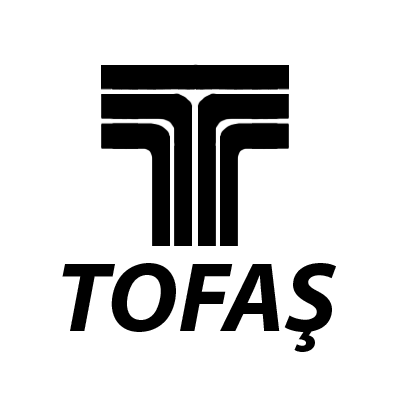
<style>
.page{position:relative;width:400px;height:400px;background:#ffffff}
.page>*{position:absolute;margin:0}
.t1{font:100px "MyriadPro-BoldIt";color:#000000}
</style>
<div class="page">
<p class="t1" style="left:62px;top:263px;width:274px;height:89px">TOFAŞ</p>
</div>
